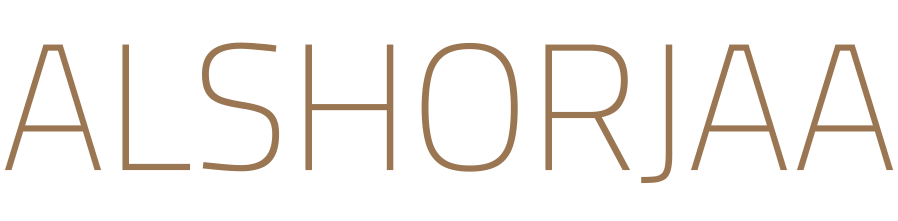
<style>
.page{position:relative;width:898px;height:221px;background:#ffffff}
.page>*{position:absolute;margin:0}
.t1{font:179.2px "Cairo-ExtraLight";color:#9b7653}
</style>
<div class="page">
<p class="t1" style="left:5px;top:42px;width:889px;height:142px">ALSHORJAA</p>
</div>
